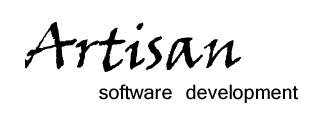
<style>
.page{position:relative;width:320px;height:120px;background:#ffffff}
.page>*{position:absolute;margin:0}
.t1{font:59.8px "VinerHandITC";color:#000000}
.t2{font:29.9px "Vrinda";color:#000000}
</style>
<div class="page">
<p class="t1" style="left:24px;top:22px;width:218px;height:51px">Artisan</p>
<p class="t2" style="left:99px;top:84px;width:199px;height:19px">software development</p>
</div>
